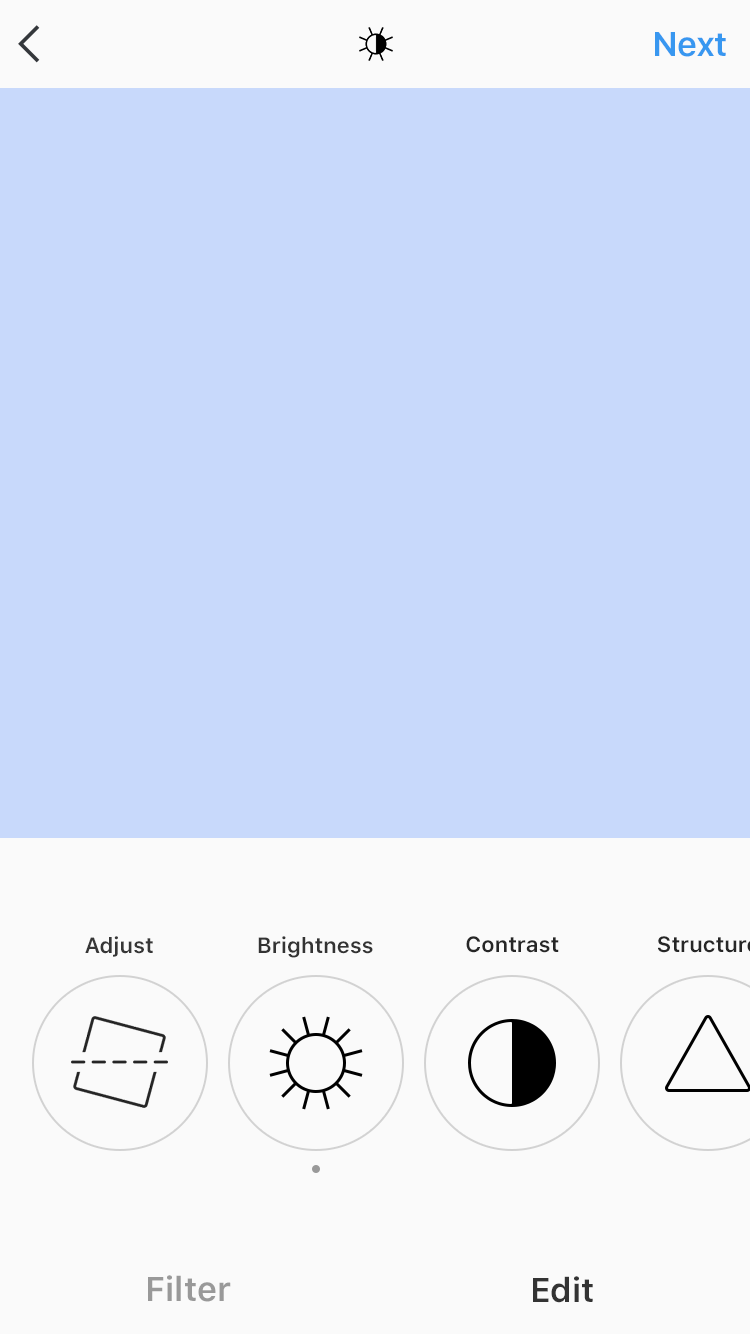
<style>
.page{position:relative;width:750px;height:1334px;background:#c8d9fb}
.page>*{position:absolute;margin:0}
.t1{font:34px "SFUIText-Semibold";letter-spacing:-0.025em;color:#3897f0}
.t2{font:22px "SFUIText-Semibold";color:#363636}
.t3{font:22px "SFUIText-Semibold";color:#333333}
.t4{font:22px "SFUIText-Semibold";color:#262626}
.t5{font:34px "SFUIText-Semibold";color:#999999}
.t6{font:34px "SFUIText-Semibold";color:#333333}
</style>
<div class="page">
<p class="t1" style="left:655px;top:32px;width:71px;height:25px">Next</p>
<p class="t2" style="left:85px;top:936px;width:68px;height:21px">Adjust</p>
<p class="t3" style="left:258px;top:936px;width:115px;height:22px">Brightness</p>
<p class="t4" style="left:466px;top:936px;width:93px;height:17px">Contrast</p>
<p class="t5" style="left:148px;top:1275px;width:83px;height:27px">Filter</p>
<p class="t6" style="left:533px;top:1276px;width:60px;height:27px">Edit</p>
</div>
